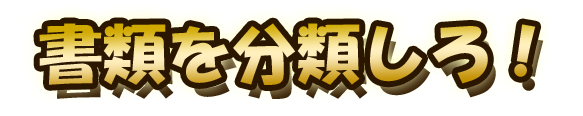
<style>
.page{position:relative;width:583px;height:116px;background:#ffffff}
.page>*{position:absolute;margin:0}
.t1{font:64.8px "HGSoeiKakupoptai"}
</style>
<div class="page">
<p class="t1" style="left:39px;top:23px;width:497px;height:62px">書類を分類しろ！</p>
</div>
